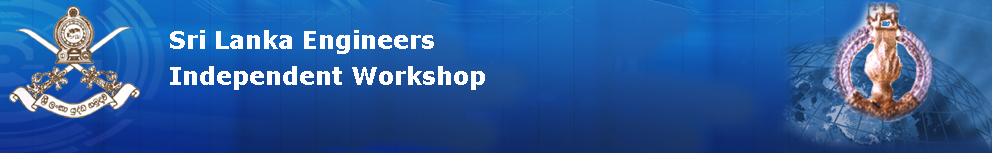
<style>
.page{position:relative;width:992px;height:153px}
.page>*{position:absolute;margin:0}
.t1{font:24px "Verdana-Bold";color:#ffffff}
</style>
<div class="page">
<p class="t1" style="left:170px;top:30px;width:264px;height:24px">Sri Lanka Engineers</p>
<p class="t1" style="left:170px;top:66px;width:315px;height:24px">Independent Workshop</p>
</div>
